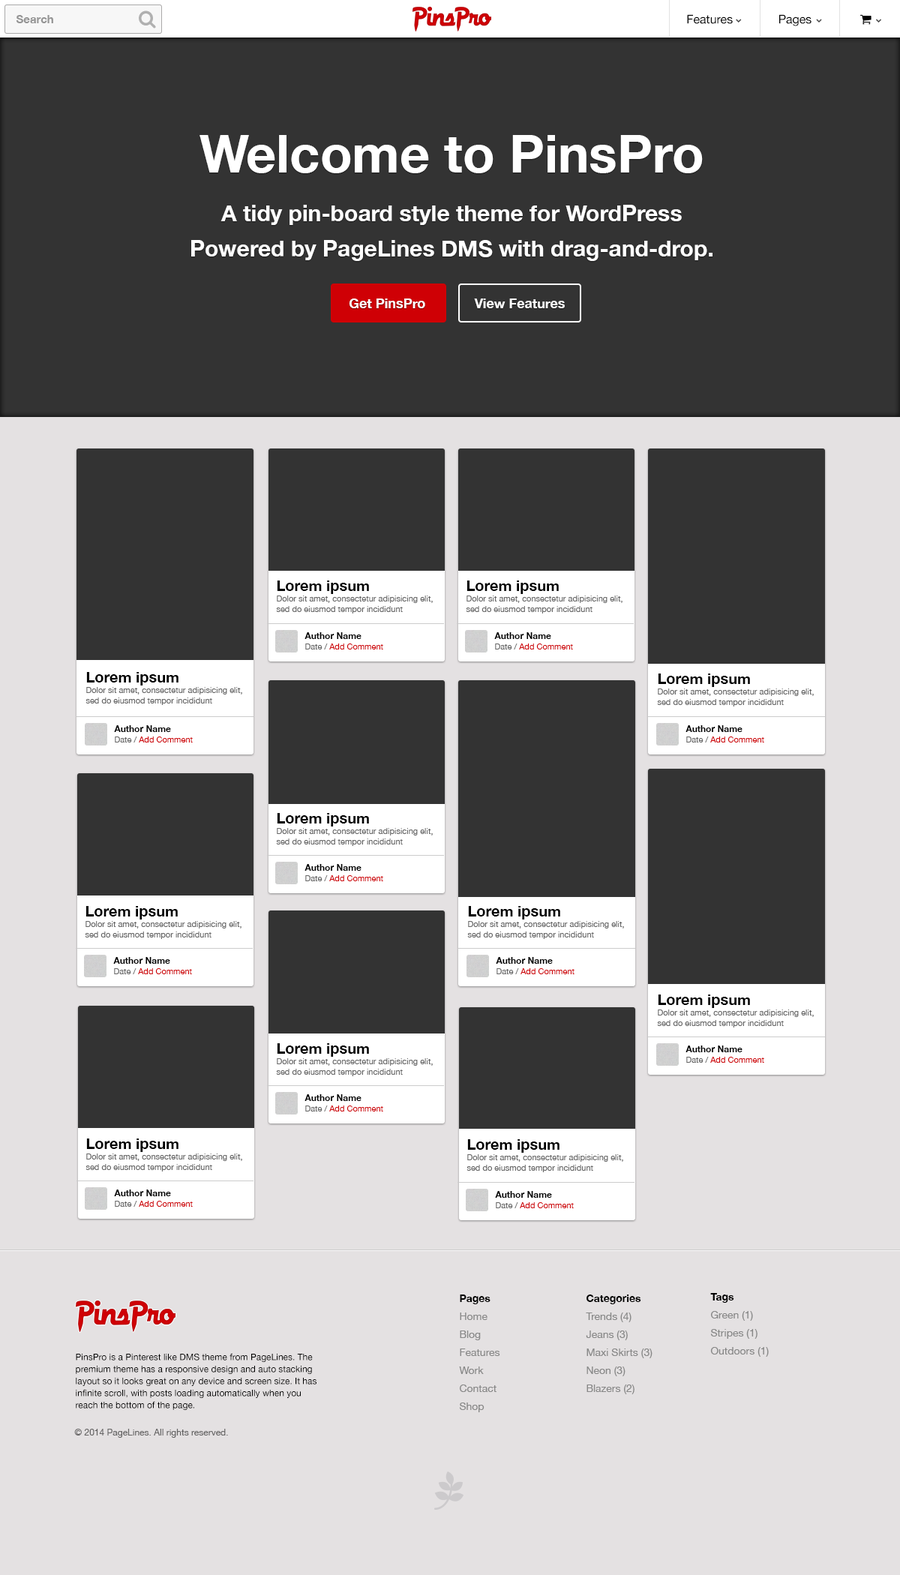
<style>
.page{position:relative;width:900px;height:1575px;background:#333333}
.page>*{position:absolute;margin:0}
.t1{font:11.3px "HelveticaNeue-Bold";color:#959595}
.t2{font:52.5px "HelveticaNeue-Bold";color:#ffffff}
.t3{font:22.5px/35.2px "HelveticaNeue-Bold";color:#ffffff}
.t4{font:13.5px "HelveticaNeue-Bold";color:#ffffff}
.t5{font:8.2px "HelveticaNeue";color:#666666}
.t6{font:15px/10.5px "HelveticaNeue-Bold";color:#000000}
.t7{font:9px/10.5px "HelveticaNeue-Bold";color:#000000}
.t8{font:8.2px "HelveticaNeue";color:#cf0005}
.t9{font:9px/10.5px "HelveticaNeue";color:#000000}
.t10{font:10.5px/18px "MyriadPro-Regular";color:#888888}
.t11{font:10.5px/18px "MyriadPro-Regular";color:#000000}
.t12{font:9px "HelveticaNeue";color:#000000}
.t13{font:9px "MyriadPro-Regular";color:#666565}
</style>
<div class="page">
<p class="t1" style="left:16px;top:15px;width:37px;height:8px">Search</p>
<p class="t2" style="left:200px;top:135px;width:503px;height:38px">Welcome to PinsPro</p>
<p class="t3" style="left:191px;top:205px;width:521px;height:56px;text-align:center">A tidy pin-board style theme for WordPress <br>Powered by PageLines DMS with drag-and-drop.</p>
<p class="t4" style="left:349px;top:298px;width:76px;height:10px">Get PinsPro</p>
<p class="t4" style="left:474px;top:298px;width:91px;height:10px">View Features</p>
<p class="t5" style="left:276px;top:580px;width:157px;height:34px"><span class="t6">Lorem ipsum<br></span>Dolor sit amet, consectetur adipisicing elit, sed do eiusmod tempor incididunt</p>
<p class="t5" style="left:466px;top:580px;width:156px;height:34px"><span class="t6">Lorem ipsum<br></span>Dolor sit amet, consectetur adipisicing elit, sed do eiusmod tempor incididunt</p>
<p class="t7" style="left:304px;top:632px;width:79px;height:18px">Author Name<br><span class="t5">Date / </span><span class="t8">Add Comment</span></p>
<p class="t7" style="left:494px;top:632px;width:79px;height:18px">Author Name<br><span class="t5">Date / </span><span class="t8">Add Comment</span></p>
<p class="t5" style="left:86px;top:672px;width:156px;height:33px"><span class="t6">Lorem ipsum<br></span>Dolor sit amet, consectetur adipisicing elit, sed do eiusmod tempor incididunt</p>
<p class="t5" style="left:657px;top:674px;width:157px;height:32px"><span class="t6">Lorem ipsum<br></span>Dolor sit amet, consectetur adipisicing elit, sed do eiusmod tempor incididunt</p>
<p class="t7" style="left:114px;top:725px;width:79px;height:17px">Author Name<br><span class="t5">Date / </span><span class="t8">Add Comment</span></p>
<p class="t7" style="left:686px;top:725px;width:78px;height:17px">Author Name<br><span class="t5">Date / </span><span class="t8">Add Comment</span></p>
<p class="t5" style="left:276px;top:813px;width:157px;height:33px"><span class="t6">Lorem ipsum<br></span>Dolor sit amet, consectetur adipisicing elit, sed do eiusmod tempor incididunt</p>
<p class="t7" style="left:304px;top:864px;width:79px;height:17px">Author Name<br><span class="t5">Date / </span><span class="t8">Add Comment</span></p>
<p class="t5" style="left:85px;top:906px;width:157px;height:33px"><span class="t6">Lorem ipsum<br></span>Dolor sit amet, consectetur adipisicing elit, sed do eiusmod tempor incididunt <br><br><span class="t9">t</span></p>
<p class="t5" style="left:467px;top:906px;width:157px;height:33px"><span class="t6">Lorem ipsum<br></span>Dolor sit amet, consectetur adipisicing elit, sed do eiusmod tempor incididunt</p>
<p class="t7" style="left:113px;top:957px;width:79px;height:17px">Author Name<br><span class="t5">Date / </span><span class="t8">Add Comment</span></p>
<p class="t7" style="left:496px;top:957px;width:78px;height:17px">Author Name<br><span class="t5">Date / </span><span class="t8">Add Comment</span></p>
<p class="t5" style="left:657px;top:994px;width:157px;height:34px"><span class="t6">Lorem ipsum<br></span>Dolor sit amet, consectetur adipisicing elit, sed do eiusmod tempor incididunt</p>
<p class="t5" style="left:276px;top:1043px;width:157px;height:33px"><span class="t6">Lorem ipsum<br></span>Dolor sit amet, consectetur adipisicing elit, sed do eiusmod tempor incididunt</p>
<p class="t7" style="left:686px;top:1046px;width:78px;height:17px">Author Name<br><span class="t5">Date / </span><span class="t8">Add Comment</span></p>
<p class="t7" style="left:304px;top:1094px;width:79px;height:18px">Author Name<br><span class="t5">Date / </span><span class="t8">Add Comment</span></p>
<p class="t5" style="left:86px;top:1138px;width:156px;height:34px"><span class="t6">Lorem ipsum<br></span>Dolor sit amet, consectetur adipisicing elit, sed do eiusmod tempor incididunt</p>
<p class="t5" style="left:466px;top:1139px;width:157px;height:33px"><span class="t6">Lorem ipsum<br></span>Dolor sit amet, consectetur adipisicing elit, sed do eiusmod tempor incididunt</p>
<p class="t7" style="left:114px;top:1190px;width:79px;height:17px">Author Name<br><span class="t5">Date / </span><span class="t8">Add Comment</span></p>
<p class="t7" style="left:495px;top:1191px;width:79px;height:17px">Author Name<br><span class="t5">Date / </span><span class="t8">Add Comment</span></p>
<p class="t10" style="left:459px;top:1294px;width:41px;height:118px"><span class="t11">Pages<br></span>Home<br>Blog<br>Features<br>Work<br>Contact<br>Shop</p>
<p class="t10" style="left:586px;top:1294px;width:66px;height:100px"><span class="t11">Categories<br></span>Trends (4)<br>Jeans (3)<br>Maxi Skirts (3)<br>Neon (3)<br>Blazers (2)</p>
<p class="t10" style="left:710px;top:1293px;width:59px;height:64px"><span class="t11">Tags<br></span>Green (1)<br>Stripes (1)<br>Outdoors (1)</p>
<p class="t12" style="left:76px;top:1353px;width:240px;height:57px">PinsPro is a Pinterest like DMS theme from PageLines. The premium theme has a responsive design and auto stacking layout so it looks great on any device and screen size. It has infinite scroll, with posts loading automatically when you reach the bottom of the page.</p>
<p class="t13" style="left:74px;top:1429px;width:154px;height:9px">© 2014 PageLines. All rights reserved.</p>
</div>
